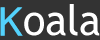
<style>
.page{position:relative;width:100px;height:40px;background:#333333}
.page>*{position:absolute;margin:0}
.t1{font:42px "TrebuchetMS";letter-spacing:-0.01em;color:#ffffff}
.t2{font:42px "MS-PGothic";letter-spacing:-0.01em;color:#53d2fc}
</style>
<div class="page">
<p class="t1" style="left:24px;top:4px;width:76px;height:32px">oala</p>
<p class="t2" style="left:0px;top:7px;width:23px;height:29px">K</p>
</div>
